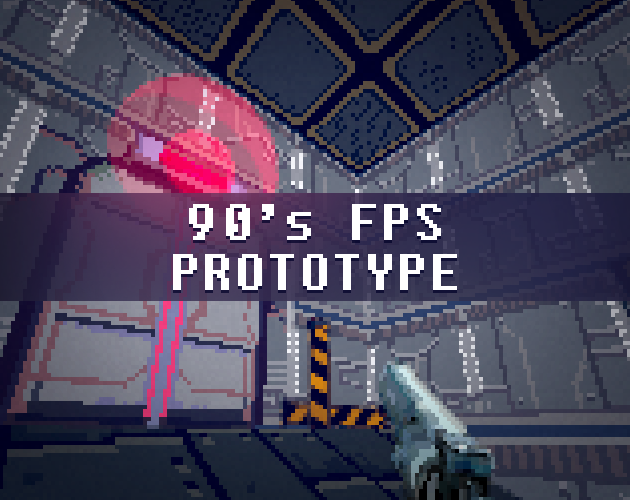
<style>
.page{position:relative;width:630px;height:500px}
.page>*{position:absolute;margin:0}
.t1{font:52px/50px "Fixedsys";color:#ffffff}
</style>
<div class="page">
<p class="t1" style="left:173px;top:204px;width:284px;height:86px;text-align:center">90’s FPS<br>PROTOTYPE</p>
</div>
